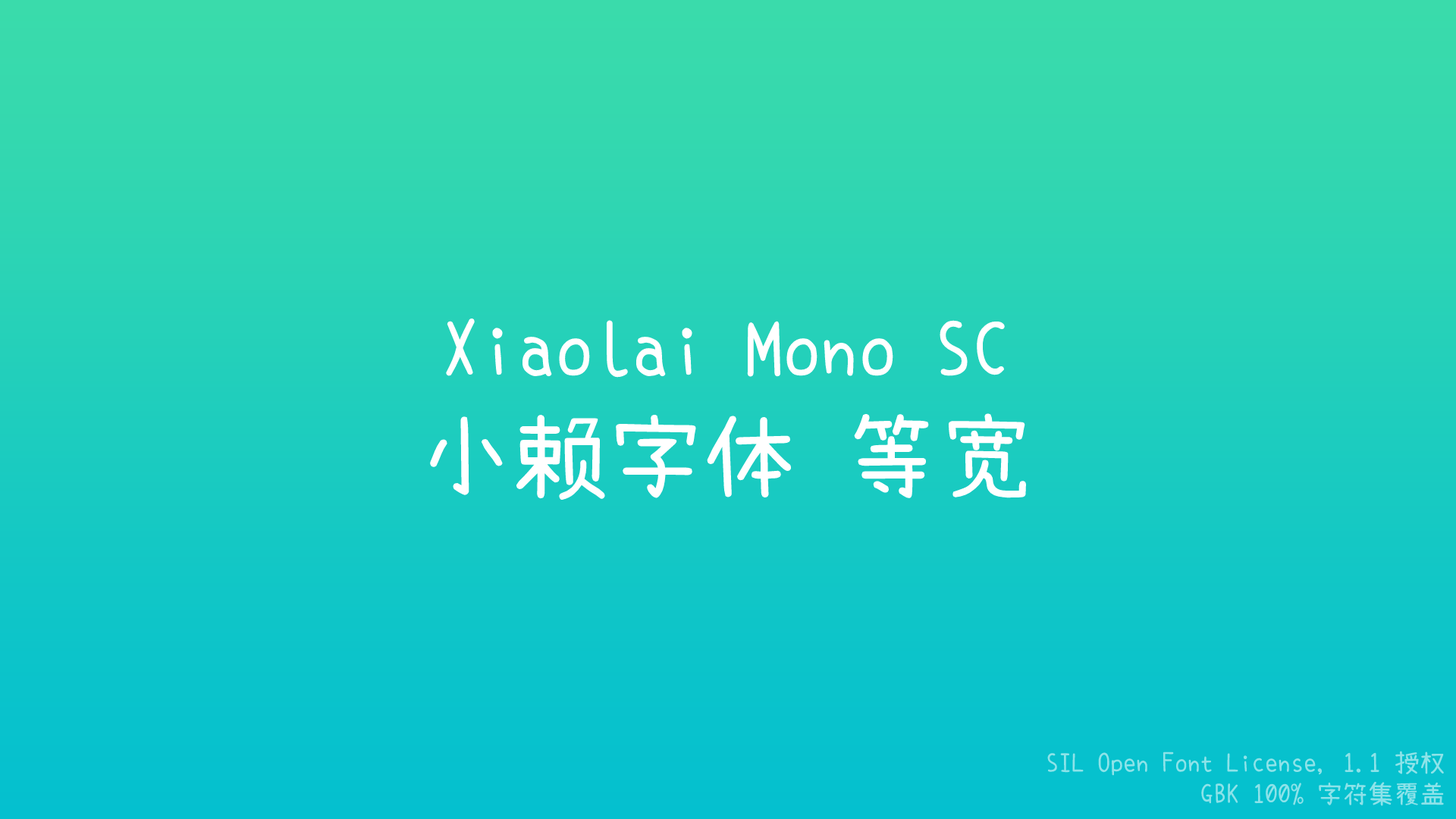
<style>
.page{position:relative;width:1456px;height:819px}
.page>*{position:absolute;margin:0}
.t1{font:75.8px "XiaolaiMonoSC";color:#ffffff}
.t2{font:94.8px "XiaolaiMonoSC";color:#ffffff}
.t3{font:25.8px "XiaolaiMonoSC";color:#8ce3e9}
</style>
<div class="page">
<p class="t1" style="left:430px;top:318px;width:596px;height:182px;text-align:center">Xiaolai Mono SC<br><span class="t2">小赖字体 等宽</span></p>
<p class="t3" style="left:1047px;top:751px;width:397px;height:55px;text-align:right">SIL Open Font License, 1.1 授权<br> GBK 100% 字符集覆盖</p>
</div>
